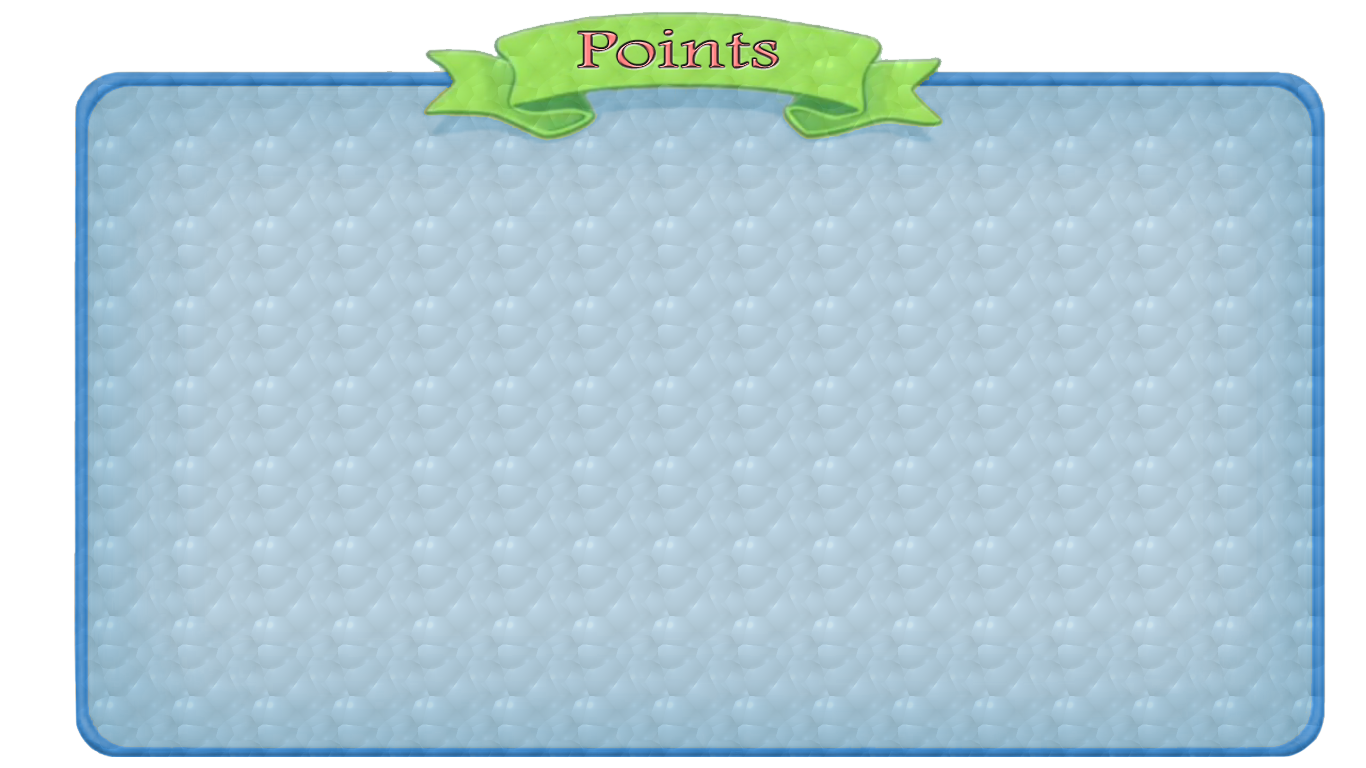
<style>
.page{position:relative;width:1366px;height:768px}
.page>*{position:absolute;margin:0}
.t1{font:56px "K-Sina";scale:1.49 1}
</style>
<div class="page">
<p class="t1" style="left:578px;top:30px;width:201px;height:39px">Points</p>
</div>
